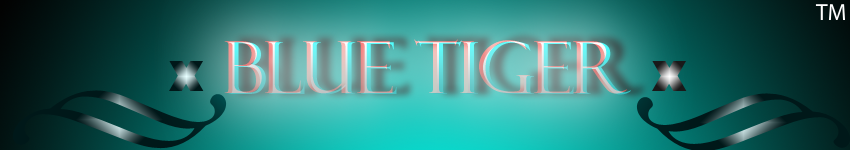
<style>
.page{position:relative;width:850px;height:150px}
.page>*{position:absolute;margin:0}
.t1{font:72px "FelixTitlingMT"}
</style>
<div class="page">
<p class="t1" style="left:224px;top:39px;width:403px;height:55px">Blue tiger</p>
<p class="t1" style="left:228px;top:40px;width:403px;height:55px">Blue tiger</p>
</div>
